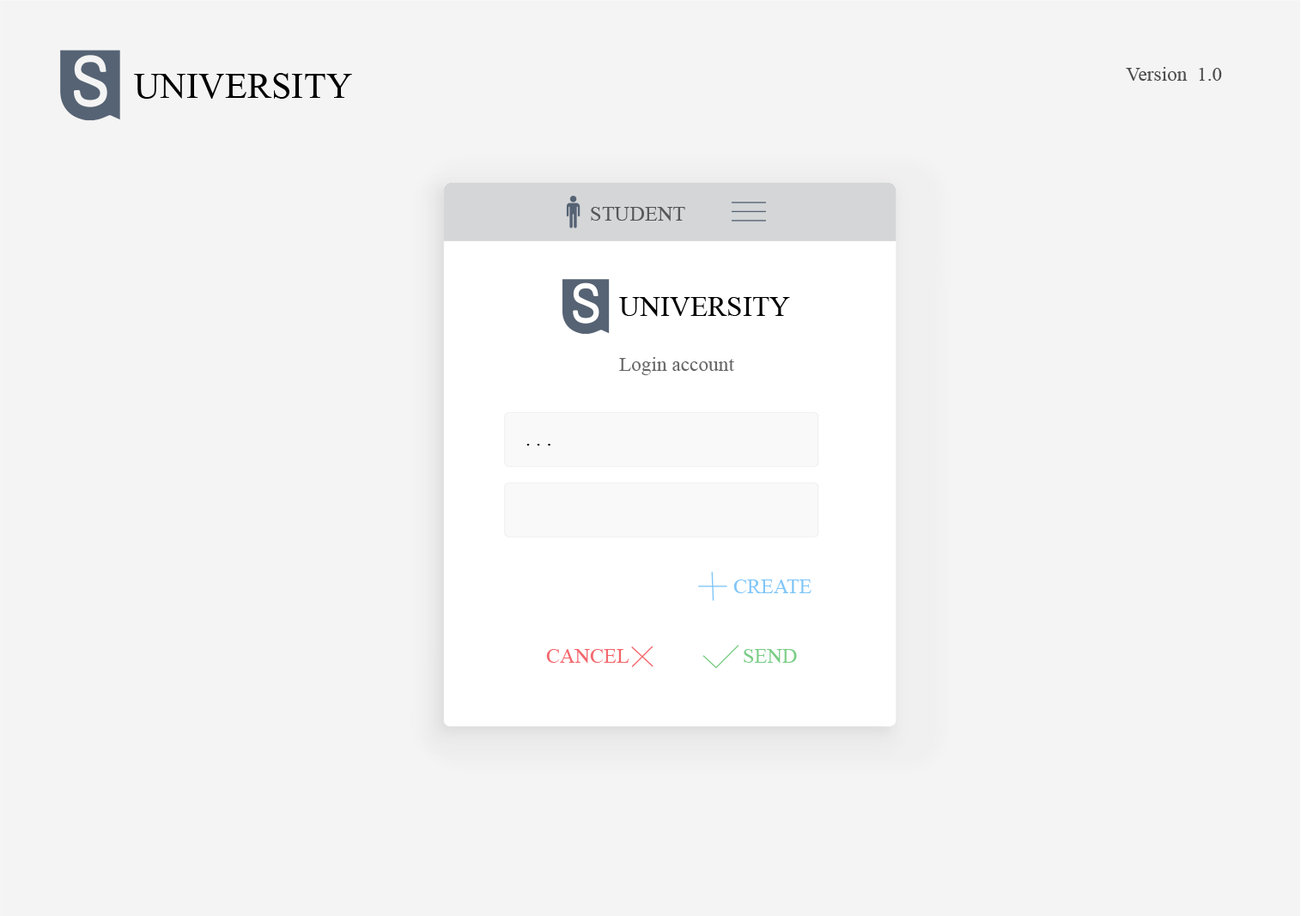
<style>
.page{position:relative;width:1301px;height:916px;background:#f4f4f4}
.page>*{position:absolute;margin:0}
.t1{font:36.5px "AcuminVariableConcept";color:#000000}
.t2{font:20px "AcuminVariableConcept";color:#4c4c4c}
.t3{font:21px "AcuminVariableConcept";color:#555656}
.t4{font:28.4px "AcuminVariableConcept";color:#000000}
.t5{font:20px "AcuminVariableConcept";color:#666666}
.t6{font:21px "AcuminVariableConcept";color:#000000}
.t7{font:20.8px "AcuminVariableConcept";color:#7ec5f8}
.t8{font:20.8px "AcuminVariableConcept";color:#f2666c}
.t9{font:20.8px "AcuminVariableConcept";color:#7acd86}
</style>
<div class="page">
<p class="t1" style="left:134px;top:73px;width:218px;height:26px">UNIVERSITY</p>
<p class="t2" style="left:1126px;top:67px;width:96px;height:14px">Version  1.0</p>
<p class="t3" style="left:591px;top:207px;width:94px;height:15px">STUDENT</p>
<p class="t4" style="left:619px;top:297px;width:171px;height:20px">UNIVERSITY</p>
<p class="t5" style="left:619px;top:357px;width:115px;height:18px">Login account</p>
<p class="t6" style="left:526px;top:444px;width:25px;height:2px">. . .</p>
<p class="t7" style="left:733px;top:580px;width:79px;height:13px">CREATE</p>
<p class="t8" style="left:546px;top:649px;width:84px;height:15px">CANCEL</p>
<p class="t9" style="left:744px;top:649px;width:53px;height:15px">SEND</p>
</div>
